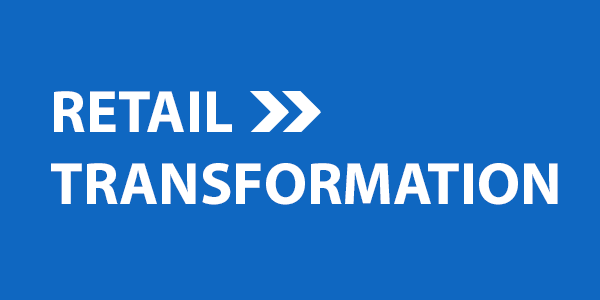
<style>
.page{position:relative;width:600px;height:300px;background:#0f67c1}
.page>*{position:absolute;margin:0}
.t1{font:60px "MyriadPro-Bold";color:#ffffff}
</style>
<div class="page">
<p class="t1" style="left:51px;top:91px;width:507px;height:114px">RETAIL<br>TRANSFORMATION</p>
</div>
